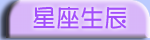
<style>
.page{position:relative;width:150px;height:40px}
.page>*{position:absolute;margin:0}
.t1{font:24px "¾­µä·±ËæÒâ Regular";color:#a34efb}
</style>
<div class="page">
<p class="t1" style="left:33px;top:6px;width:94px;height:23px">星座生辰</p>
</div>
